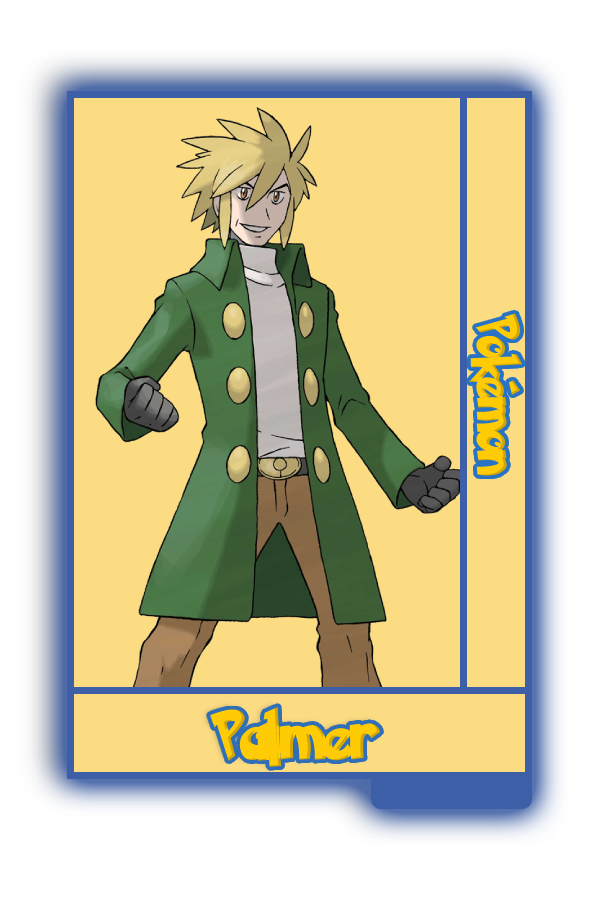
<style>
.page{position:relative;width:600px;height:900px;background:#fbdc83}
.page>*{position:absolute;margin:0}
.t1{font:48.8px "PokemonSolidNormal";color:#ffcb05;scale:0.8 1}
.t2{font:56.6px "PokemonSolidNormal";color:#ffcb05;scale:0.92 1}
</style>
<div class="page">
<p class="t1" style="left:469px;top:313px;width:54px;height:163px;rotate:90deg">Pokémon</p>
<p class="t2" style="left:210px;top:706px;width:171px;height:61px">Palmer</p>
</div>
